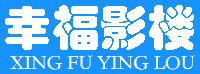
<style>
.page{position:relative;width:200px;height:74px;background:#1693ff}
.page>*{position:absolute;margin:0}
.t1{font:48px "STHupo";color:#ffffff}
.t2{font:20px "STSong";color:#ffffff}
</style>
<div class="page">
<p class="t1" style="left:5px;top:5px;width:189px;height:45px">幸福影楼</p>
<p class="t2" style="left:10px;top:55px;width:185px;height:15px">XING FU YING LOU</p>
</div>
